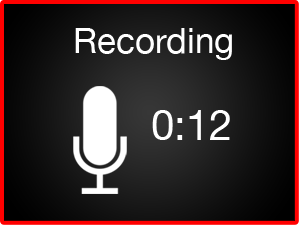
<style>
.page{position:relative;width:299px;height:225px}
.page>*{position:absolute;margin:0}
.t1{font:60px "HelveticaNeue";color:#ffffff}
.t2{font:72px "HelveticaNeue";color:#ffffff}
</style>
<div class="page">
<p class="t1" style="left:75px;top:28px;width:157px;height:32px">Recording</p>
<p class="t2" style="left:152px;top:110px;width:78px;height:30px">0:12</p>
</div>
